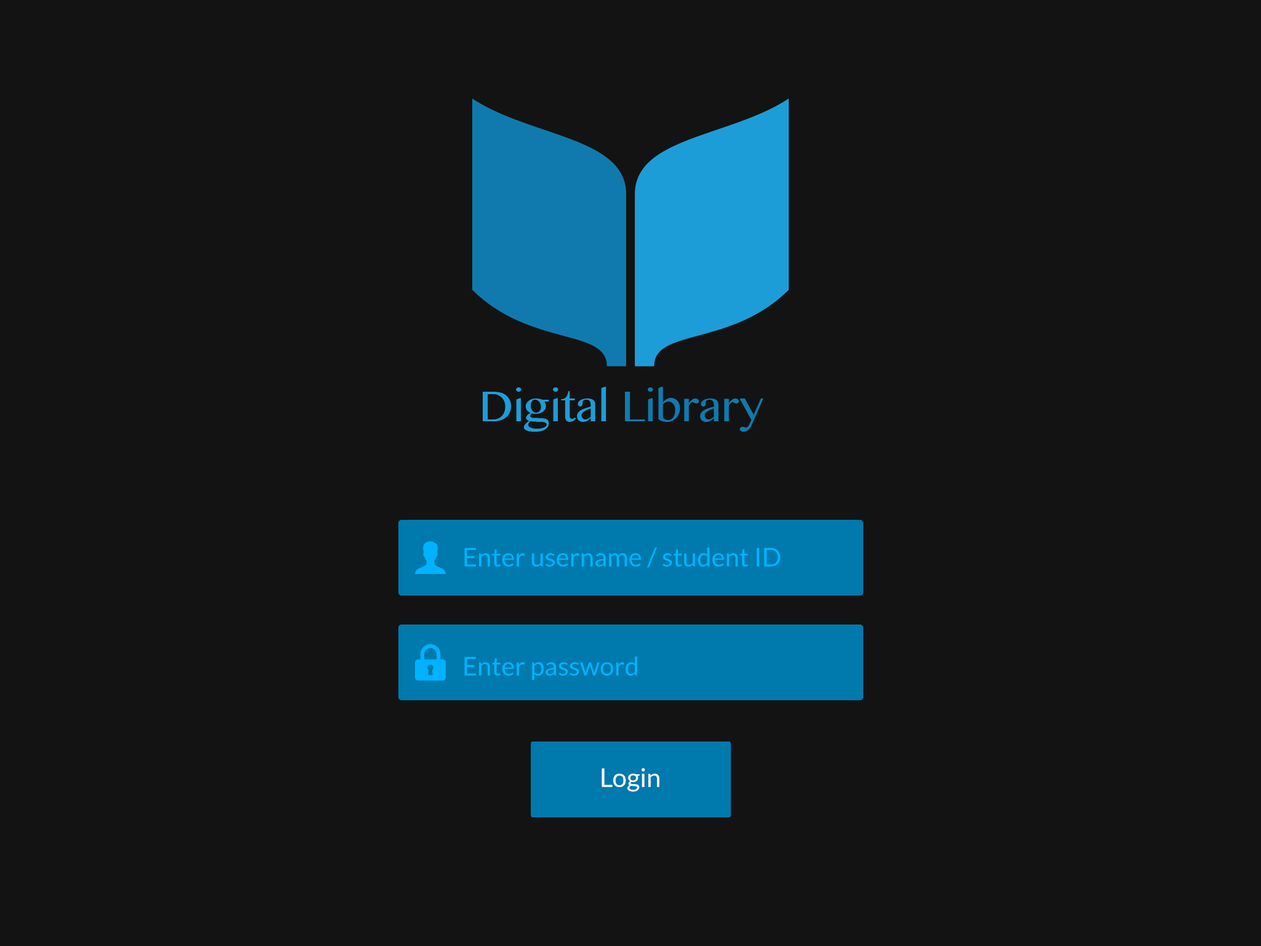
<style>
.page{position:relative;width:1261px;height:946px;background:#131313}
.page>*{position:absolute;margin:0}
.t1{font:25.9px "Lato-Regular";color:#00b3ff}
.t2{font:25.9px "Lato-Regular";color:#ffffff}
</style>
<div class="page">
<p class="t1" style="left:464px;top:547px;width:317px;height:21px">Enter username / student ID</p>
<p class="t1" style="left:464px;top:656px;width:173px;height:24px">Enter password</p>
<p class="t2" style="left:602px;top:768px;width:57px;height:24px">Login</p>
</div>
